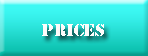
<style>
.page{position:relative;width:148px;height:56px}
.page>*{position:absolute;margin:0}
.t1{font:16px "StencilStd";color:#fcf6f6}
</style>
<div class="page">
<p class="t1" style="left:42px;top:24px;width:62px;height:12px">PRICES</p>
</div>
